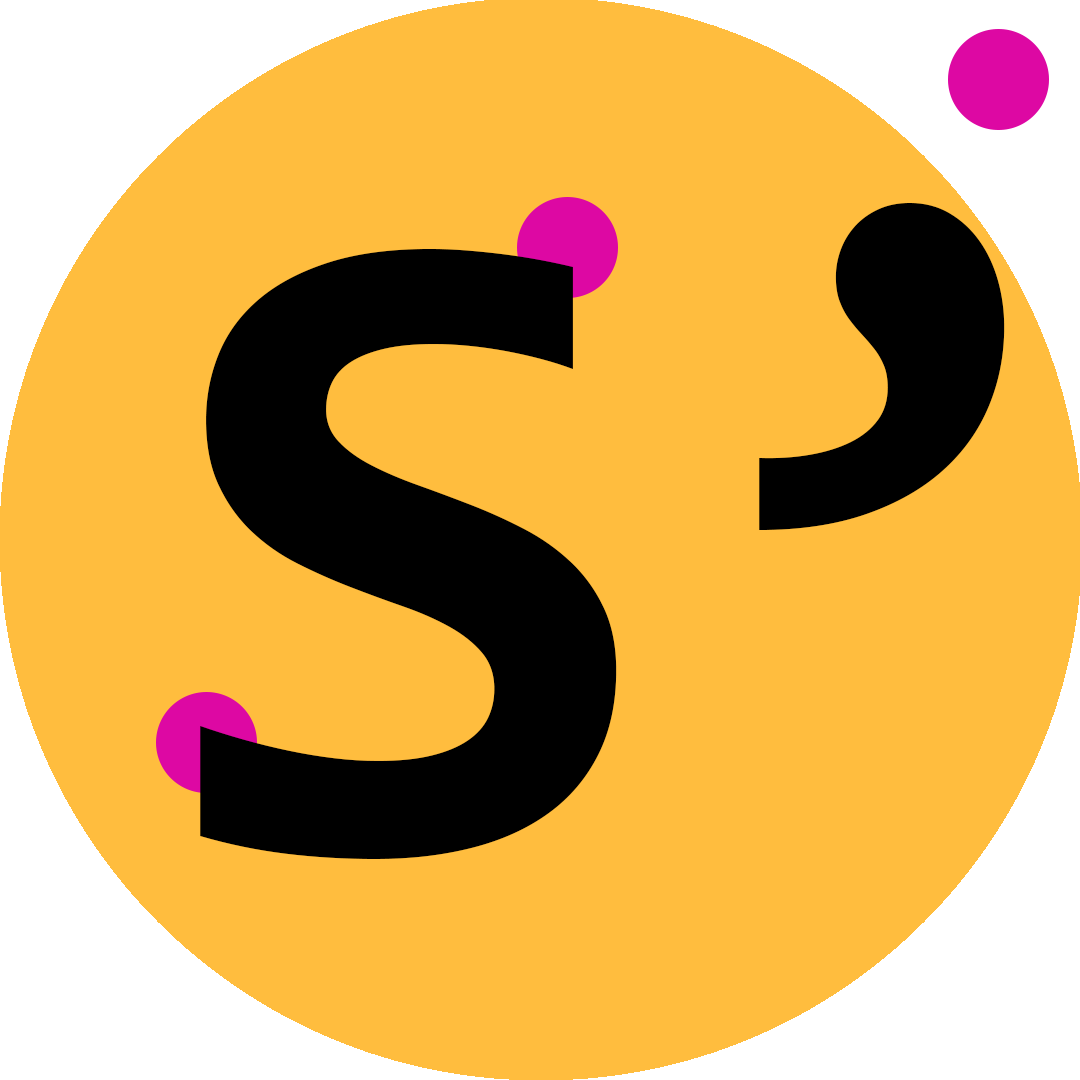
<style>
.page{position:relative;width:1080px;height:1080px;background:#ffbd3e}
.page>*{position:absolute;margin:0}
.t1{font:924.3px "Consolas-Bold";color:#000000}
</style>
<div class="page">
<p class="t1" style="left:200px;top:203px;width:805px;height:656px">S’</p>
</div>
